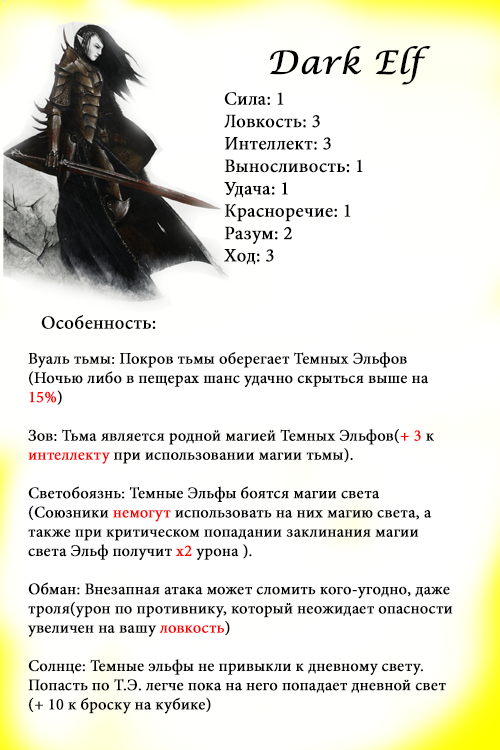
<style>
.page{position:relative;width:500px;height:750px;background:#ffffff}
.page>*{position:absolute;margin:0}
.t1{font:32px "LucidaCalligraphy-Italic";color:#000000;font-weight:bold}
.t2{font:18.7px "MinionPro-Regular";color:#000000;font-weight:bold}
.t3{font:16px "MinionPro-Regular";color:#000000;font-weight:bold}
.t4{font:16px "MinionPro-Regular";color:#ff0000;font-weight:bold}
</style>
<div class="page">
<p class="t1" style="left:270px;top:46px;width:161px;height:39px">Dark Elf</p>
<p class="t2" style="left:224px;top:92px;width:139px;height:173px">Сила: 1<br>Ловкость: 3<br>Интеллект: 3<br>Выносливость: 1<br>Удача: 1<br>Красноречие: 1<br>Разум: 2<br>Ход: 3</p>
<p class="t2" style="left:41px;top:315px;width:115px;height:14px">Особенность:</p>
<p class="t3" style="left:28px;top:352px;width:425px;height:362px">Вуаль тьмы: Покров тьмы оберегает Темных Эльфов <br>(Ночью либо в пещерах шанс удачно скрыться выше на <span class="t4">15%</span>)<br><br>Зов: Тьма является родной магией Темных Эльфов(<span class="t4">+ 3</span> к <span class="t4">интеллекту</span> при использовании магии тьмы).<br><br>Светобоязнь: Темные Эльфы боятся магии света<br>(Союзники <span class="t4">немогут</span> использовать на них магию света, а также при критическом попадании заклинания магии света Эльф получит <span class="t4">х2 </span>урона ).<br><br>Обман: Внезапная атака может сломить кого-угодно, даже троля(урон по противнику, который неожидает опасности увеличен на вашу <span class="t4">ловкость</span>)<br><br>Солнце: Темные эльфы не привыкли к дневному свету.<br>Попасть по Т.Э. легче пока на него попадает дневной свет<br>(+ 10 к броску на кубике)</p>
</div>
